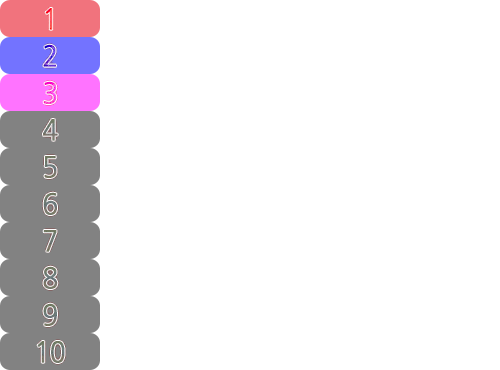
<style>
.page{position:relative;width:500px;height:370px;background:#ffffff}
.page>*{position:absolute;margin:0}
.t1{font:28.5px "NanumGothic";letter-spacing:-0.03em;color:#ff5655;font-weight:bold;scale:0.91 1}
.t2{font:28.5px "NanumGothic";letter-spacing:-0.03em;font-weight:bold;scale:0.91 1}
.t3{font:28.5px "NanumGothic";letter-spacing:-0.03em;color:#72796f;font-weight:bold;scale:0.91 1}
.t4{font:28.5px "NanumGothic";letter-spacing:-0.03em;color:#727967;font-weight:bold;scale:0.91 1}
.t5{font:28.5px "NanumGothic";letter-spacing:-0.03em;color:#707a6f;font-weight:bold;scale:0.91 1}
.t6{font:28.5px "NanumGothic";letter-spacing:-0.03em;color:#727a6f;font-weight:bold;scale:0.91 1}
.t7{font:28.5px "NanumGothic";letter-spacing:-0.03em;color:#707a71;font-weight:bold;scale:0.91 1}
</style>
<div class="page">
<p class="t1" style="left:45px;top:8px;width:8px;height:22px">1</p>
<p class="t2" style="left:43px;top:44px;width:13px;height:23px">2</p>
<p class="t2" style="left:43px;top:81px;width:14px;height:23px">3</p>
<p class="t3" style="left:43px;top:119px;width:15px;height:22px">4</p>
<p class="t4" style="left:44px;top:156px;width:13px;height:22px">5</p>
<p class="t5" style="left:43px;top:192px;width:14px;height:23px">6</p>
<p class="t6" style="left:43px;top:266px;width:15px;height:23px">8</p>
<p class="t7" style="left:43px;top:303px;width:14px;height:23px">9</p>
</div>
